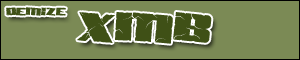
<style>
.page{position:relative;width:300px;height:60px;background:#7b8a55}
.page>*{position:absolute;margin:0}
.t1{font:14px "AftershockDebris";color:#3f5016}
.t2{font:40px "SFAftershockDebris";color:#3f5016}
</style>
<div class="page">
<p class="t1" style="left:6px;top:7px;width:60px;height:9px">demize</p>
<p class="t2" style="left:77px;top:12px;width:135px;height:32px">XMB</p>
</div>
